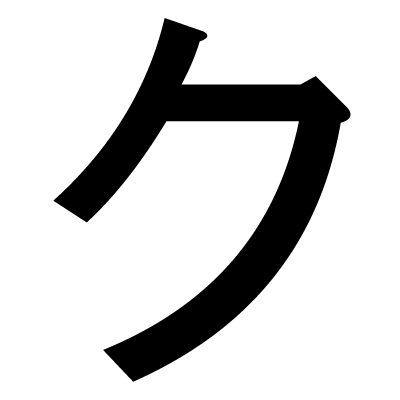
<style>
.page{position:relative;width:400px;height:400px;background:#ffffff}
.page>*{position:absolute;margin:0}
.t1{font:424.8px "MS-PGothic";color:#000000}
</style>
<div class="page">
<p class="t1" style="left:53px;top:18px;width:298px;height:364px">ク</p>
</div>
